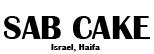
<style>
.page{position:relative;width:154px;height:54px;background:#ffffff}
.page>*{position:absolute;margin:0}
.t1{font:34px "BritannicBold";color:#010000}
.t2{font:9px "BritannicBold";color:#010000}
</style>
<div class="page">
<p class="t1" style="left:3px;top:16px;width:147px;height:23px">SAB CAKE</p>
<p class="t2" style="left:51px;top:44px;width:49px;height:8px">Israel, Haifa</p>
</div>
